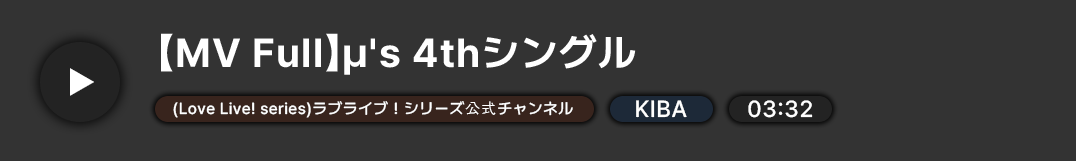
<style>
.page{position:relative;width:1076px;height:161px;background:#333333}
.page>*{position:absolute;margin:0}
.t1{font:40.3px "PretendardVariable-Bold";letter-spacing:0.03em;color:#ffffff}
.t2{font:31.2px "PretendardVariable-Bold";letter-spacing:0.03em;color:#ffffff}
.t3{font:15.8px "PretendardVariable-Medium";letter-spacing:0.03em;color:#ffffff}
.t4{font:15.8px "Gulim";letter-spacing:0.03em;color:#ffffff}
.t5{font:23.2px "PretendardVariable-Medium";letter-spacing:0.03em;color:#ffffff}
</style>
<div class="page">
<p class="t1" style="left:161px;top:33px;width:475px;height:42px">【MV Full】µ's 4thシングル</p>
<p class="t2" style="left:70px;top:68px;width:24px;height:28px">▶</p>
<p class="t3" style="left:173px;top:101px;width:400px;height:17px">(Love Live! series)ラブライブ！シリーズ<span class="t4">公式</span>チャンネル</p>
<p class="t5" style="left:636px;top:100px;width:51px;height:18px">KIBA</p>
<p class="t5" style="left:748px;top:100px;width:65px;height:18px">03:32</p>
</div>
